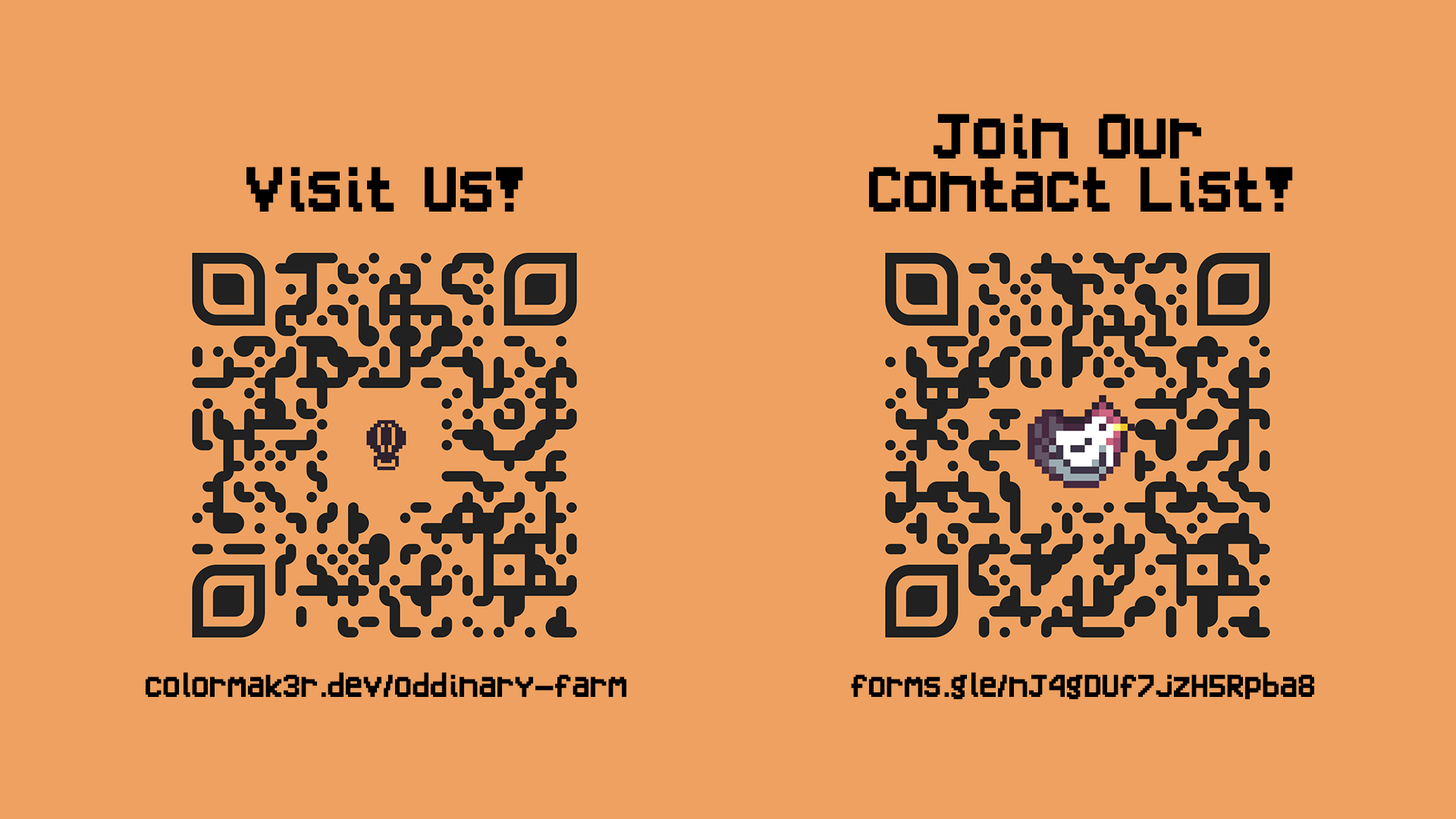
<style>
.page{position:relative;width:1456px;height:819px;background:#eea160}
.page>*{position:absolute;margin:0}
.t1{font:44.5px "Tomorrow_Night";color:#000000}
.t2{font:22.3px "Tomorrow_Night";color:#000000}
</style>
<div class="page">
<p class="t1" style="left:869px;top:114px;width:424px;height:98px;text-align:center">Join Our <br>Contact List!</p>
<p class="t1" style="left:246px;top:167px;width:277px;height:45px">Visit Us!</p>
<p class="t2" style="left:146px;top:672px;width:480px;height:25px">colormak3r.dev/oddinary-farm</p>
<p class="t2" style="left:851px;top:672px;width:463px;height:27px">forms.gle/nJ4gDUf7jzH5Rpba8</p>
</div>
